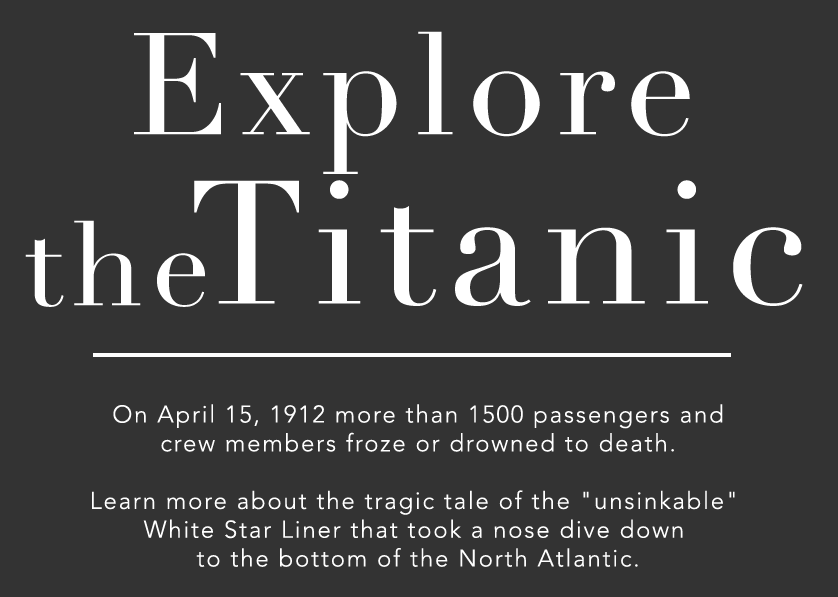
<style>
.page{position:relative;width:838px;height:597px;background:#333333}
.page>*{position:absolute;margin:0}
.t1{font:142px "Didot";letter-spacing:0.075em;color:#ffffff}
.t2{font:172px "Didot";letter-spacing:0.075em;color:#ffffff}
.t3{font:117px "Didot";letter-spacing:0.075em;color:#ffffff}
.t4{font:24px "Avenir-Light";letter-spacing:0.075em;color:#ffffff}
</style>
<div class="page">
<p class="t1" style="left:134px;top:31px;width:556px;height:143px">Explore</p>
<p class="t2" style="left:194px;top:180px;width:609px;height:126px">Titanic</p>
<p class="t3" style="left:25px;top:220px;width:180px;height:87px">the</p>
<p class="t4" style="left:92px;top:404px;width:643px;height:163px;text-align:center">On April 15, 1912 more than 1500 passengers and<br> crew members froze or drowned to death. <br><br>Learn more about the tragic tale of the "unsinkable" <br>White Star Liner that took a nose dive down <br>to the bottom of the North Atlantic.</p>
</div>
